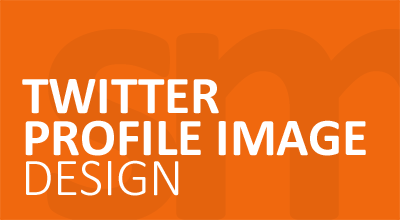
<style>
.page{position:relative;width:400px;height:220px;background:#f0680e}
.page>*{position:absolute;margin:0}
.t1{font:53.3px/41.6px "Calibri-Bold";color:#ffffff}
.t2{font:53.3px "Calibri-Light";color:#ffffff}
</style>
<div class="page">
<p class="t1" style="left:22px;top:79px;width:344px;height:77px">TWITTER<br>PROFILE IMAGE</p>
<p class="t2" style="left:26px;top:160px;width:153px;height:36px">DESIGN</p>
</div>
